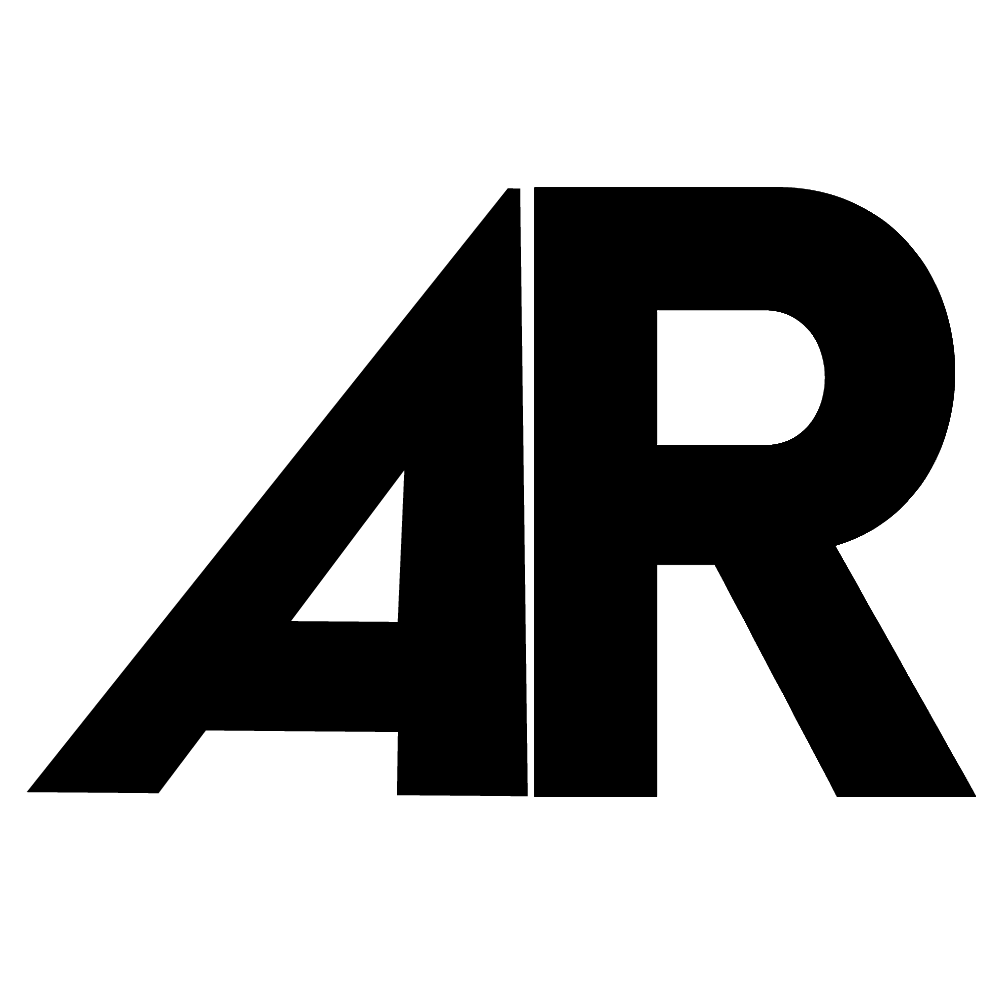
<style>
.page{position:relative;width:1000px;height:1000px;background:#ffffff}
.page>*{position:absolute;margin:0}
.t1{font:877.4px "LoveloBlack";color:#000000;scale:0.92 1}
</style>
<div class="page">
<p class="t1" style="left:26px;top:188px;width:502px;height:609px">A</p>
</div>
